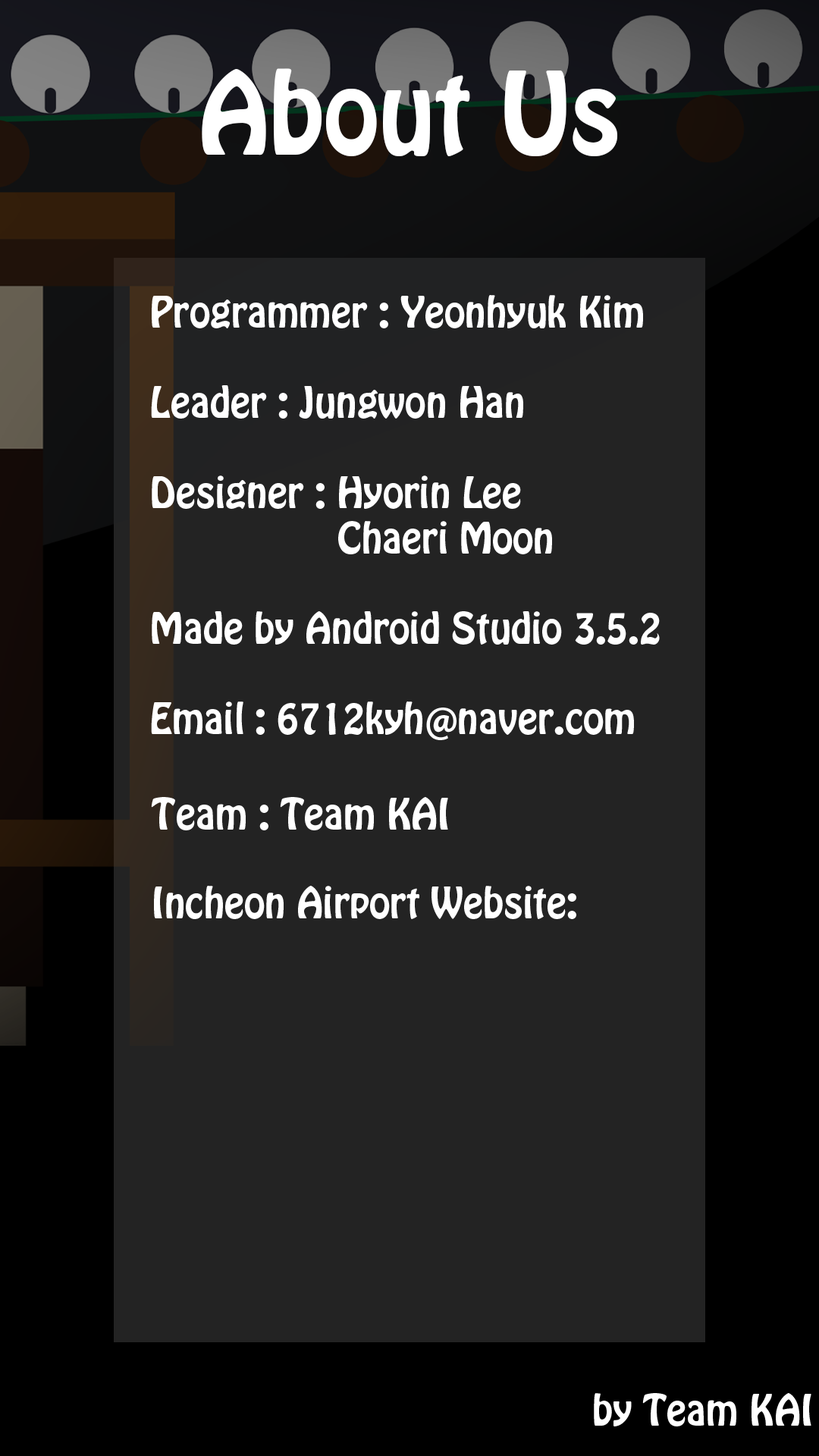
<style>
.page{position:relative;width:819px;height:1456px;background:#232323}
.page>*{position:absolute;margin:0}
.t1{font:101.1px "HoboStd";color:#ffffff}
.t2{font:37.9px "HoboStd";color:#ffffff}
</style>
<div class="page">
<p class="t1" style="left:202px;top:68px;width:415px;height:88px">About Us</p>
<p class="t2" style="left:152px;top:295px;width:491px;height:33px">Programmer : Yeonhyuk Kim</p>
<p class="t2" style="left:151px;top:385px;width:372px;height:34px">Leader : Jungwon Han</p>
<p class="t2" style="left:152px;top:475px;width:400px;height:79px">Designer : Hyorin Lee<br>                 Chaeri Moon</p>
<p class="t2" style="left:152px;top:611px;width:508px;height:34px">Made by Android Studio 3.5.2</p>
<p class="t2" style="left:151px;top:701px;width:483px;height:39px">Email : 6712kyh@naver.com</p>
<p class="t2" style="left:151px;top:797px;width:297px;height:33px">Team : Team KAI</p>
<p class="t2" style="left:154px;top:886px;width:422px;height:33px">Incheon Airport Website:</p>
<p class="t2" style="left:594px;top:1393px;width:217px;height:33px">by Team KAI</p>
</div>
